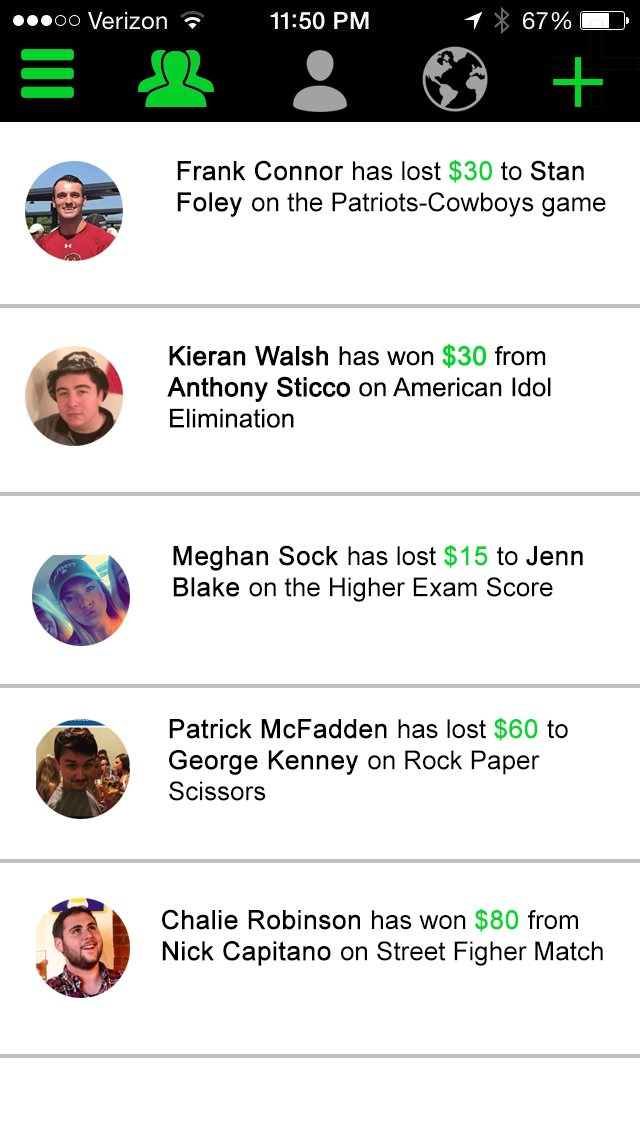
<style>
.page{position:relative;width:640px;height:1136px;background:#ffffff}
.page>*{position:absolute;margin:0}
.t1{font:26px "ArialMT";color:#000000}
.t2{font:26px "ArialMT";color:#000000;font-weight:bold}
.t3{font:26px "ArialMT";color:#05d52c;font-weight:bold}
</style>
<div class="page">
<p class="t1" style="left:177px;top:160px;width:429px;height:57px;text-align:right"><span class="t2">Frank Connor </span>has lost <span class="t3">$30</span> to <span class="t2">Stan Foley </span>on the Patriots-Cowboys game</p>
<p class="t1" style="left:167px;top:344px;width:384px;height:84px;text-align:right"><span class="t2">Kieran Walsh </span>has won <span class="t3">$30</span> from <span class="t2">Anthony Sticco</span> on American Idol Elimination</p>
<p class="t1" style="left:173px;top:545px;width:410px;height:57px;text-align:right"><span class="t2">Meghan Sock </span>has lost <span class="t3">$15 </span>to <span class="t2">Jenn Blake </span>on the Higher Exam Score</p>
<p class="t1" style="left:169px;top:718px;width:399px;height:83px;text-align:right"><span class="t2">Patrick McFadden </span>has lost <span class="t3">$60 </span>to <span class="t2">George Kenney </span>on Rock Paper Scissors</p>
<p class="t1" style="left:162px;top:909px;width:441px;height:57px;text-align:right"><span class="t2">Chalie Robinson </span>has won <span class="t3">$80 </span>from <span class="t2">Nick Capitano </span>on Street Figher Match</p>
</div>
